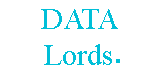
<style>
.page{position:relative;width:160px;height:70px;background:#ffffff}
.page>*{position:absolute;margin:0}
.t1{font:30px "TimesNewRomanPSMT";color:#00bfd8}
</style>
<div class="page">
<p class="t1" style="left:41px;top:9px;width:77px;height:56px;text-align:center">DATA<br>Lords</p>
</div>
